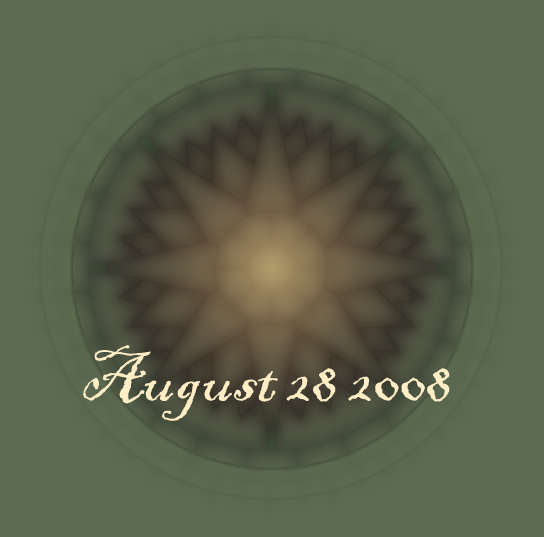
<style>
.page{position:relative;width:544px;height:537px;background:#5d6d52}
.page>*{position:absolute;margin:0}
.t1{font:72px "BlackadderITC-Regular";color:#ffedc6}
</style>
<div class="page">
<p class="t1" style="left:83px;top:345px;width:367px;height:76px">August 28 2008</p>
</div>
